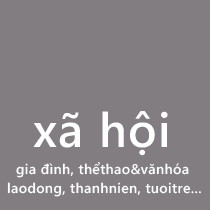
<style>
.page{position:relative;width:210px;height:210px;background:#817d81}
.page>*{position:absolute;margin:0}
.t1{font:48px "SegoeWP-Semibold";letter-spacing:0.025em;color:#ffffff}
.t2{font:14px "SegoeWP-Semibold";letter-spacing:0.025em;color:#fefefe}
.t3{font:14px "SegoeWP-Semibold";letter-spacing:0.025em;color:#ffffff}
</style>
<div class="page">
<p class="t1" style="left:33px;top:111px;width:135px;height:45px">xã hội</p>
<p class="t2" style="left:16px;top:162px;width:173px;height:16px">gia đình, thểthao&amp;vănhóa</p>
<p class="t3" style="left:7px;top:182px;width:194px;height:15px">laodong, thanhnien, tuoitre...</p>
</div>
